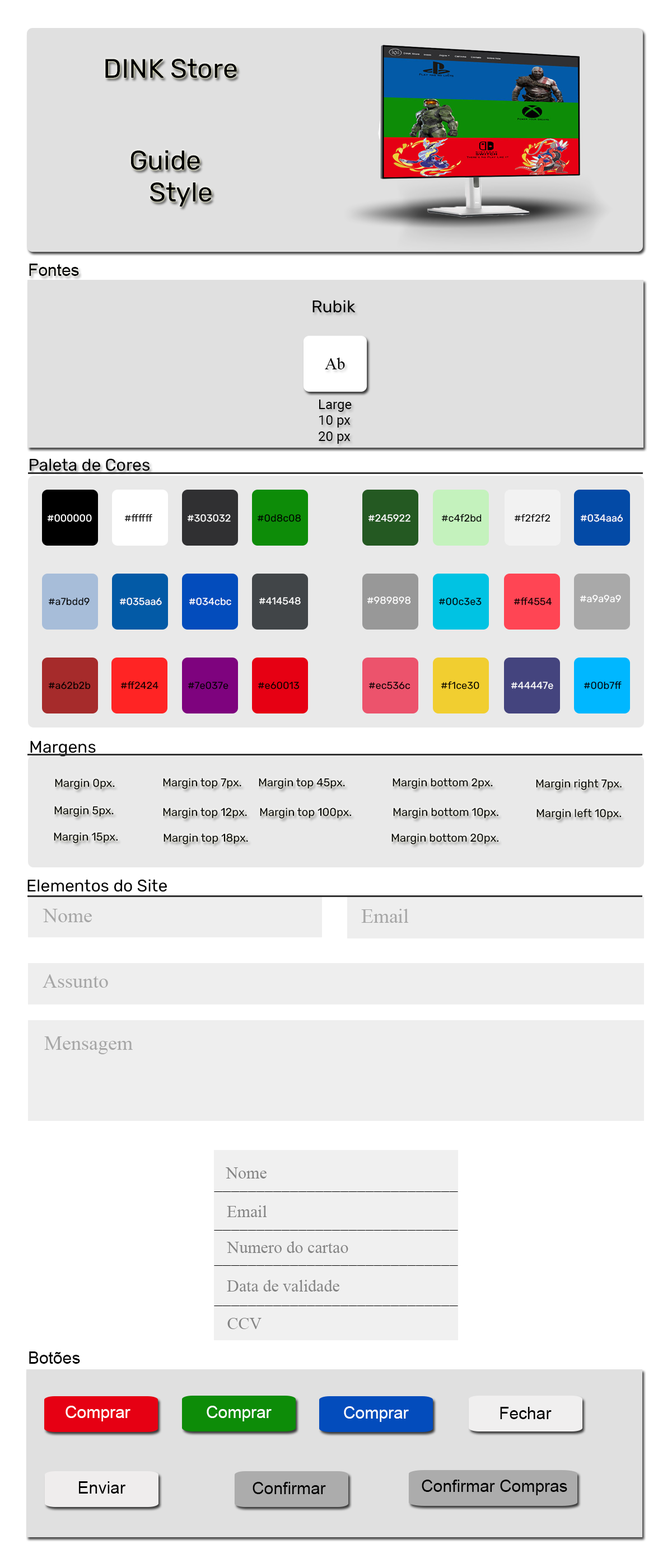
<style>
.page{position:relative;width:672px;height:1568px;background:#ffffff}
.page>*{position:absolute;margin:0}
.t1{font:26.9px "Rubik-Regular";color:#000000}
.t2{font:16.8px "ArialMT";color:#000000}
.t3{font:16.8px "Rubik-Regular";color:#000000}
.t4{font:16.8px "TimesNewRomanPSMT";color:#000000}
.t5{font:13.4px "Roboto-Regular";color:#000000}
.t6{font:10.1px "Rubik-Regular";color:#ffffff}
.t7{font:10.1px "Rubik-Regular";color:#000000}
.t8{font:11.2px "Rubik-Regular";color:#000000}
.t9{font:20.1px "TimesNewRomanPSMT";color:#a6a6a6}
.t10{font:16.8px "TimesNewRomanPSMT";color:#848484}
.t11{font:16.8px "ArialMT";color:#ffffff}
</style>
<div class="page">
<p class="t1" style="left:105px;top:59px;width:132px;height:19px">DINK Store</p>
<p class="t1" style="left:131px;top:150px;width:81px;height:56px">Guide<br>   Style</p>
<p class="t2" style="left:29px;top:264px;width:50px;height:12px">Fontes</p>
<p class="t3" style="left:312px;top:300px;width:43px;height:13px">Rubik</p>
<p class="t4" style="left:325px;top:358px;width:20px;height:11px">Ab</p>
<p class="t5" style="left:318px;top:400px;width:33px;height:44px">Large<br>10 px<br>20 px</p>
<p class="t3" style="left:30px;top:458px;width:119px;height:13px">Paleta de Cores</p>
<p class="t6" style="left:48px;top:514px;width:44px;height:8px">#000000</p>
<p class="t7" style="left:125px;top:514px;width:27px;height:8px">#ffffff</p>
<p class="t6" style="left:187px;top:514px;width:44px;height:8px">#303032</p>
<p class="t7" style="left:257px;top:514px;width:44px;height:8px">#0d8c08</p>
<p class="t6" style="left:368px;top:514px;width:42px;height:8px">#245922</p>
<p class="t7" style="left:442px;top:514px;width:39px;height:8px">#c4f2bd</p>
<p class="t7" style="left:514px;top:514px;width:36px;height:8px">#f2f2f2</p>
<p class="t6" style="left:580px;top:514px;width:42px;height:8px">#034aa6</p>
<p class="t7" style="left:49px;top:598px;width:41px;height:7px">#a7bdd9</p>
<p class="t6" style="left:120px;top:598px;width:42px;height:7px">#035aa6</p>
<p class="t6" style="left:189px;top:598px;width:42px;height:7px">#034cbc</p>
<p class="t6" style="left:259px;top:597px;width:42px;height:8px">#414548</p>
<p class="t6" style="left:367px;top:597px;width:44px;height:7px">#989898</p>
<p class="t7" style="left:439px;top:598px;width:42px;height:7px">#00c3e3</p>
<p class="t7" style="left:514px;top:597px;width:38px;height:8px">#ff4554</p>
<p class="t6" style="left:580px;top:595px;width:41px;height:8px">#a9a9a9</p>
<p class="t7" style="left:49px;top:682px;width:42px;height:7px">#a62b2b</p>
<p class="t7" style="left:121px;top:681px;width:37px;height:8px">#ff2424</p>
<p class="t7" style="left:188px;top:682px;width:40px;height:7px">#7e037e</p>
<p class="t7" style="left:258px;top:682px;width:41px;height:7px">#e60013</p>
<p class="t7" style="left:369px;top:682px;width:41px;height:7px">#ec536c</p>
<p class="t7" style="left:441px;top:681px;width:38px;height:8px">#f1ce30</p>
<p class="t6" style="left:511px;top:682px;width:42px;height:7px">#44447e</p>
<p class="t7" style="left:584px;top:681px;width:37px;height:8px">#00b7ff</p>
<p class="t3" style="left:30px;top:741px;width:66px;height:16px">Margens</p>
<p class="t8" style="left:55px;top:778px;width:60px;height:12px">Margin 0px.</p>
<p class="t8" style="left:163px;top:778px;width:78px;height:11px">Margin top 7px.</p>
<p class="t8" style="left:259px;top:778px;width:86px;height:11px">Margin top 45px.</p>
<p class="t8" style="left:392px;top:778px;width:100px;height:11px">Margin bottom 2px.</p>
<p class="t8" style="left:536px;top:779px;width:85px;height:11px">Margin right 7px.</p>
<p class="t8" style="left:54px;top:806px;width:60px;height:11px">Margin 5px.</p>
<p class="t8" style="left:163px;top:808px;width:84px;height:11px">Margin top 12px.</p>
<p class="t8" style="left:260px;top:808px;width:91px;height:11px">Margin top 100px.</p>
<p class="t8" style="left:393px;top:808px;width:105px;height:11px">Margin bottom 10px.</p>
<p class="t8" style="left:536px;top:809px;width:85px;height:11px">Margin left 10px.</p>
<p class="t8" style="left:54px;top:832px;width:64px;height:11px">Margin 15px.</p>
<p class="t8" style="left:163px;top:833px;width:85px;height:11px">Margin top 18px.</p>
<p class="t8" style="left:391px;top:833px;width:108px;height:11px">Margin bottom 20px.</p>
<p class="t3" style="left:27px;top:879px;width:140px;height:13px">Elementos do Site</p>
<p class="t9" style="left:43px;top:909px;width:49px;height:14px">Nome</p>
<p class="t9" style="left:361px;top:909px;width:48px;height:14px">Email</p>
<p class="t9" style="left:43px;top:974px;width:65px;height:14px">Assunto</p>
<p class="t9" style="left:44px;top:1036px;width:89px;height:18px">Mensagem</p>
<p class="t10" style="left:226px;top:1167px;width:40px;height:12px">Nome</p>
<p class="t4" style="left:214px;top:1191px;width:244px;height:1px">_____________________________</p>
<p class="t10" style="left:227px;top:1205px;width:40px;height:12px">Email</p>
<p class="t4" style="left:214px;top:1230px;width:244px;height:1px">_____________________________</p>
<p class="t10" style="left:227px;top:1241px;width:121px;height:13px">Numero do cartao</p>
<p class="t4" style="left:214px;top:1265px;width:244px;height:1px">_____________________________</p>
<p class="t10" style="left:227px;top:1280px;width:112px;height:12px">Data de validade</p>
<p class="t4" style="left:214px;top:1306px;width:244px;height:0px">_____________________________</p>
<p class="t10" style="left:227px;top:1318px;width:34px;height:11px">CCV</p>
<p class="t2" style="left:29px;top:1351px;width:51px;height:13px">Botões</p>
<p class="t11" style="left:65px;top:1406px;width:65px;height:15px">Comprar</p>
<p class="t11" style="left:206px;top:1406px;width:65px;height:15px">Comprar</p>
<p class="t11" style="left:344px;top:1406px;width:65px;height:16px">Comprar</p>
<p class="t2" style="left:500px;top:1407px;width:51px;height:12px">Fechar</p>
<p class="t2" style="left:79px;top:1481px;width:47px;height:13px">Enviar</p>
<p class="t2" style="left:252px;top:1482px;width:74px;height:12px">Confirmar</p>
<p class="t2" style="left:421px;top:1480px;width:146px;height:15px">Confirmar Compras</p>
</div>
